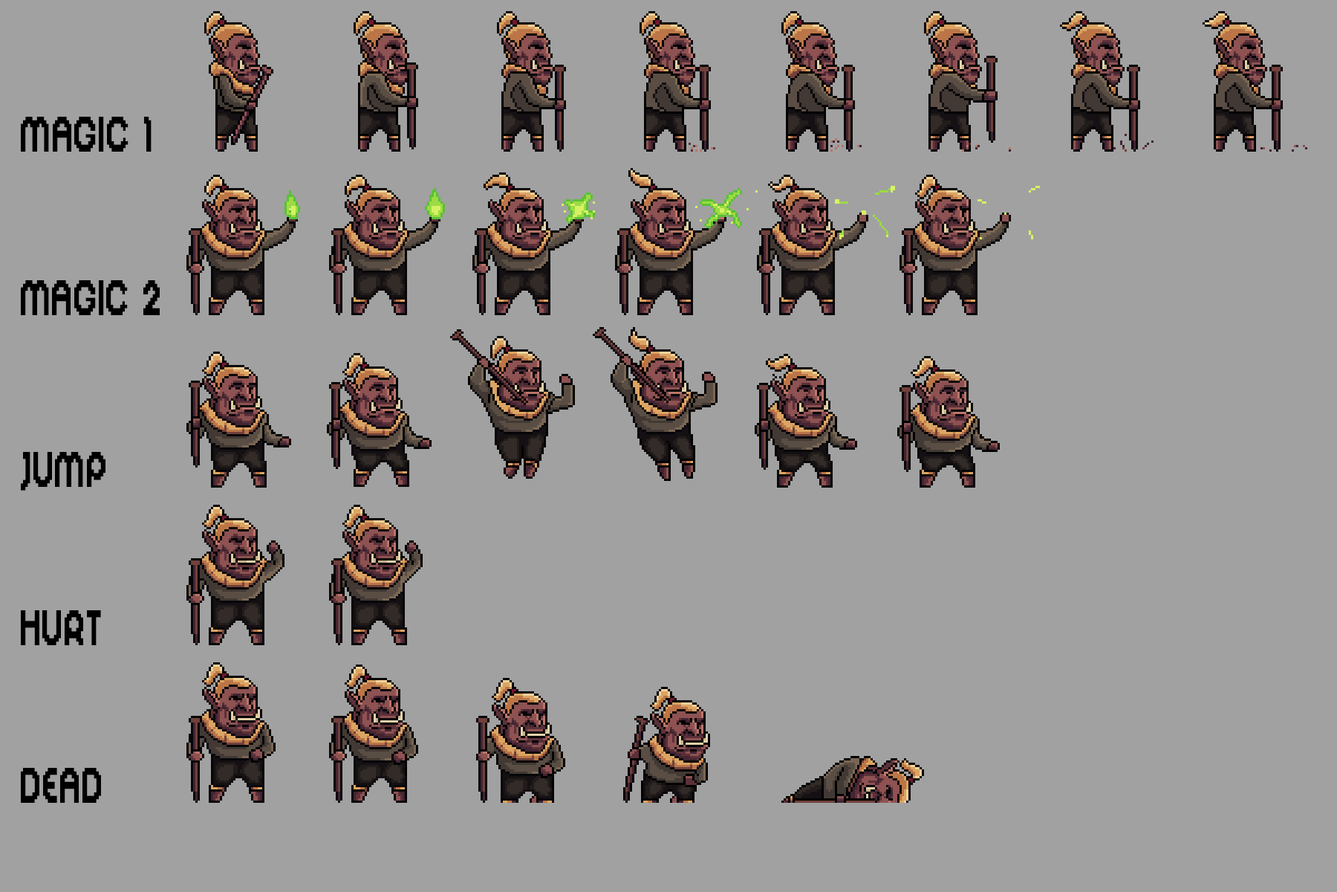
<style>
.page{position:relative;width:1337px;height:892px;background:#a1a1a1}
.page>*{position:absolute;margin:0}
.t1{font:55.7px "DigitalDisco";letter-spacing:0.03em;color:#000000;scale:0.67 1}
</style>
<div class="page">
<p class="t1" style="left:21px;top:117px;width:131px;height:35px">MAGIC 1</p>
<p class="t1" style="left:21px;top:280px;width:139px;height:35px">MAGIC 2</p>
<p class="t1" style="left:21px;top:452px;width:85px;height:38px">JUMP</p>
<p class="t1" style="left:21px;top:610px;width:80px;height:35px">HURT</p>
<p class="t1" style="left:21px;top:768px;width:80px;height:34px">DEAD</p>
</div>
